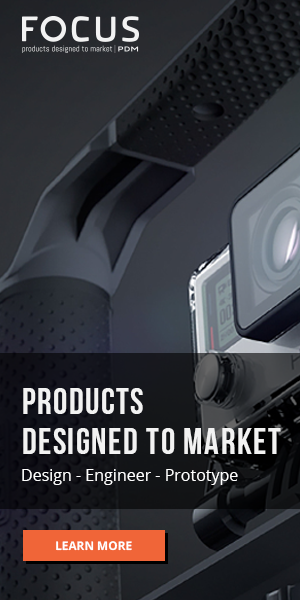
<style>
.page{position:relative;width:300px;height:600px}
.page>*{position:absolute;margin:0}
.t1{font:36px/39.2px "BebasNeueBold";letter-spacing:0.04em;color:#f2f2f2;text-transform:uppercase}
.t2{font:16px "OpenSans";color:#ffffff}
.t3{font:12px "OpenSans-Bold";color:#ffffff}
</style>
<div class="page">
<p class="t1" style="left:23px;top:388px;width:258px;height:66px">products <br>designed to market</p>
<p class="t2" style="left:22px;top:469px;width:216px;height:16px">Design - Engineer - Prototype</p>
<p class="t3" style="left:56px;top:541px;width:76px;height:10px">LEARN MORE</p>
</div>
